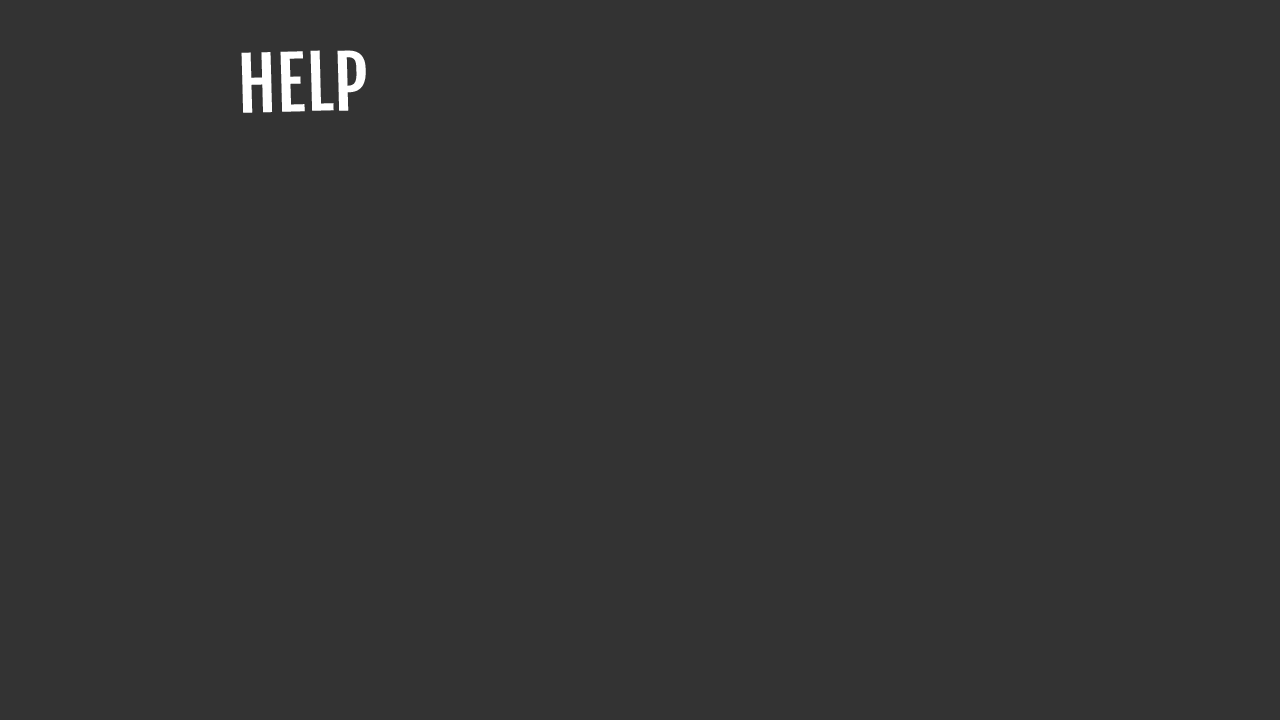
<style>
.page{position:relative;width:1280px;height:720px;background:#333333}
.page>*{position:absolute;margin:0}
.t1{font:72px "FjallaOne-Regular";color:#ffffff}
</style>
<div class="page">
<p class="t1" style="left:241px;top:50px;width:125px;height:63px;rotate:-2deg">HELP</p>
</div>
